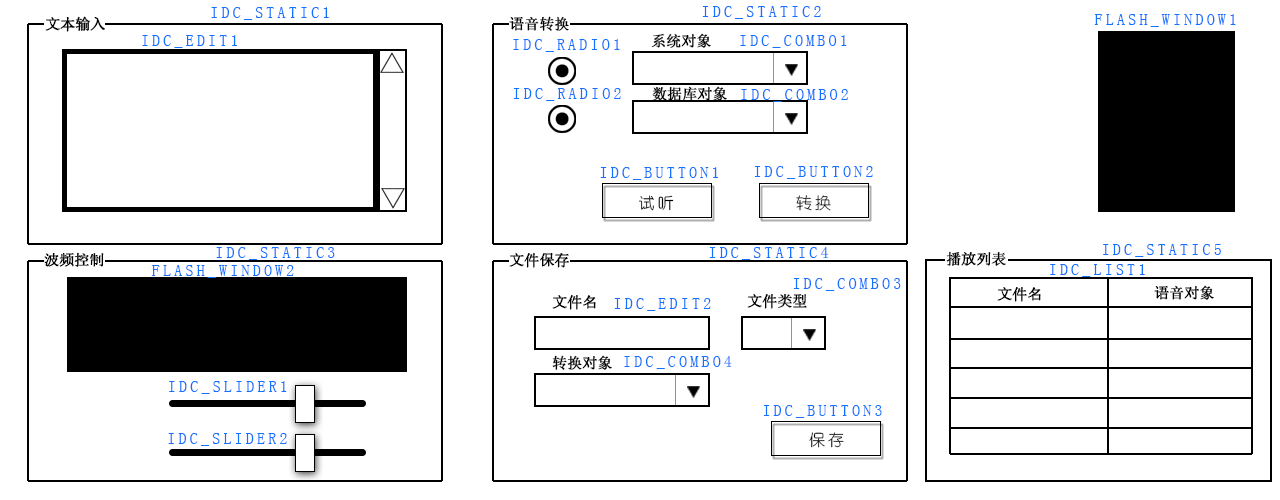
<style>
.page{position:relative;width:1280px;height:500px;background:#ffffff}
.page>*{position:absolute;margin:0}
.t1{font:12px "YouYuan";letter-spacing:0.2em;color:#1371ff}
.t2{font:14.7px "SimSun";color:#000000;font-weight:bold}
.t3{font:16px "YouYuan";letter-spacing:0.2em;color:#000000}
.t4{font:12px "YouYuan";letter-spacing:0.2em;color:#000000}
</style>
<div class="page">
<p class="t1" style="left:702px;top:6px;width:119px;height:13px">IDC_STATIC2</p>
<p class="t2" style="left:45px;top:16px;width:60px;height:16px">文本输入</p>
<p class="t1" style="left:211px;top:7px;width:118px;height:13px">IDC_STATIC1</p>
<p class="t2" style="left:509px;top:16px;width:60px;height:15px">语音转换</p>
<p class="t1" style="left:1094px;top:14px;width:142px;height:13px">FLASH_WINDOW1</p>
<p class="t1" style="left:142px;top:35px;width:95px;height:13px">IDC_EDIT1</p>
<p class="t1" style="left:513px;top:39px;width:107px;height:13px">IDC_RADIO1</p>
<p class="t2" style="left:651px;top:33px;width:60px;height:15px">系统对象</p>
<p class="t1" style="left:740px;top:35px;width:107px;height:13px">IDC_COMBO1</p>
<p class="t1" style="left:513px;top:88px;width:108px;height:13px">IDC_RADIO2</p>
<p class="t2" style="left:652px;top:86px;width:75px;height:15px">数据库对象</p>
<p class="t1" style="left:741px;top:89px;width:107px;height:13px">IDC_COMBO2</p>
<p class="t1" style="left:600px;top:167px;width:118px;height:13px">IDC_BUTTON1</p>
<p class="t1" style="left:754px;top:166px;width:119px;height:13px">IDC_BUTTON2</p>
<p class="t3" style="left:638px;top:195px;width:36px;height:16px">试听</p>
<p class="t4" style="left:796px;top:195px;width:35px;height:16px">转换</p>
<p class="t1" style="left:709px;top:246px;width:120px;height:14px">IDC_STATIC4</p>
<p class="t1" style="left:1103px;top:244px;width:118px;height:13px">IDC_STATIC5</p>
<p class="t2" style="left:44px;top:252px;width:60px;height:15px">波频控制</p>
<p class="t1" style="left:216px;top:247px;width:119px;height:13px">IDC_STATIC3</p>
<p class="t2" style="left:509px;top:253px;width:60px;height:15px">文件保存</p>
<p class="t2" style="left:946px;top:251px;width:60px;height:15px">播放列表</p>
<p class="t1" style="left:152px;top:265px;width:142px;height:13px">FLASH_WINDOW2</p>
<p class="t1" style="left:1050px;top:264px;width:95px;height:13px">IDC_LIST1</p>
<p class="t1" style="left:793px;top:278px;width:108px;height:13px">IDC_COMBO3</p>
<p class="t2" style="left:747px;top:293px;width:60px;height:16px">文件类型</p>
<p class="t2" style="left:997px;top:287px;width:44px;height:15px">文件名</p>
<p class="t2" style="left:1154px;top:285px;width:60px;height:15px">语音对象</p>
<p class="t2" style="left:552px;top:295px;width:44px;height:15px">文件名</p>
<p class="t1" style="left:614px;top:298px;width:97px;height:13px">IDC_EDIT2</p>
<p class="t2" style="left:552px;top:355px;width:60px;height:15px">转换对象</p>
<p class="t1" style="left:624px;top:355px;width:108px;height:14px">IDC_COMBO4</p>
<p class="t1" style="left:169px;top:381px;width:118px;height:13px">IDC_SLIDER1</p>
<p class="t1" style="left:763px;top:405px;width:119px;height:13px">IDC_BUTTON3</p>
<p class="t1" style="left:168px;top:433px;width:119px;height:13px">IDC_SLIDER2</p>
<p class="t4" style="left:809px;top:432px;width:35px;height:16px">保存</p>
</div>
